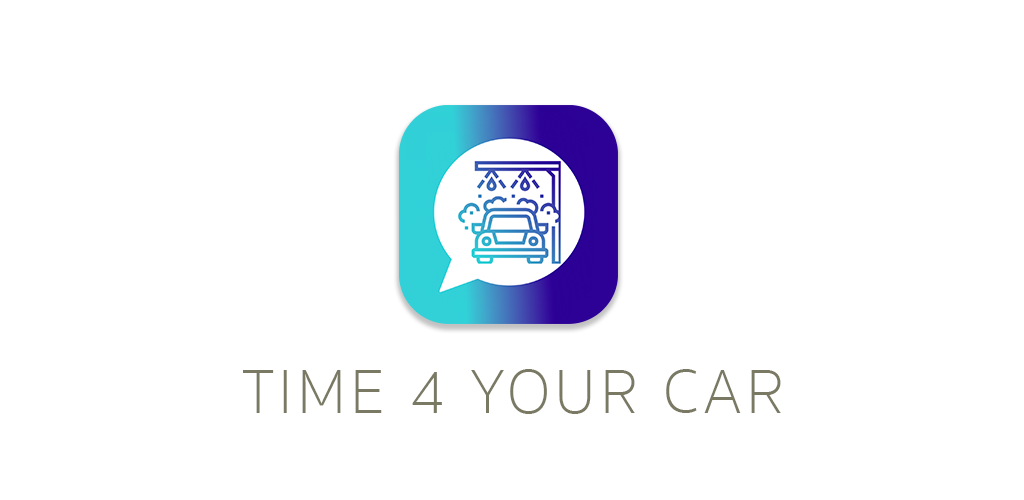
<style>
.page{position:relative;width:1024px;height:500px;background:#ffffff}
.page>*{position:absolute;margin:0}
.t1{font:64px "SukhumvitSet-Thin";letter-spacing:0.06em;color:#7a7964;text-transform:uppercase}
</style>
<div class="page">
<p class="t1" style="left:243px;top:369px;width:538px;height:45px">Time 4 your car</p>
</div>
